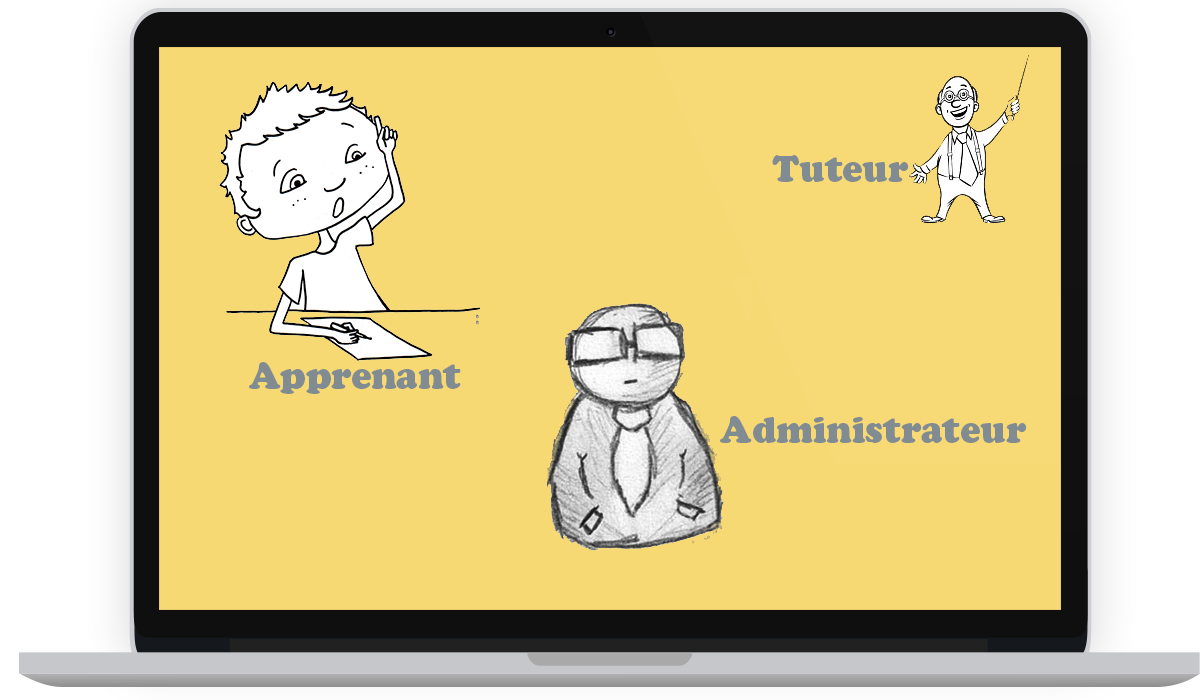
<style>
.page{position:relative;width:1200px;height:700px;background:#f7d974}
.page>*{position:absolute;margin:0}
.t1{font:36px "CooperBlackStd";color:#818b92}
</style>
<div class="page">
<p class="t1" style="left:772px;top:155px;width:137px;height:27px">Tuteur</p>
<p class="t1" style="left:249px;top:362px;width:212px;height:32px">Apprenant</p>
<p class="t1" style="left:720px;top:416px;width:307px;height:27px">Administrateur</p>
</div>
